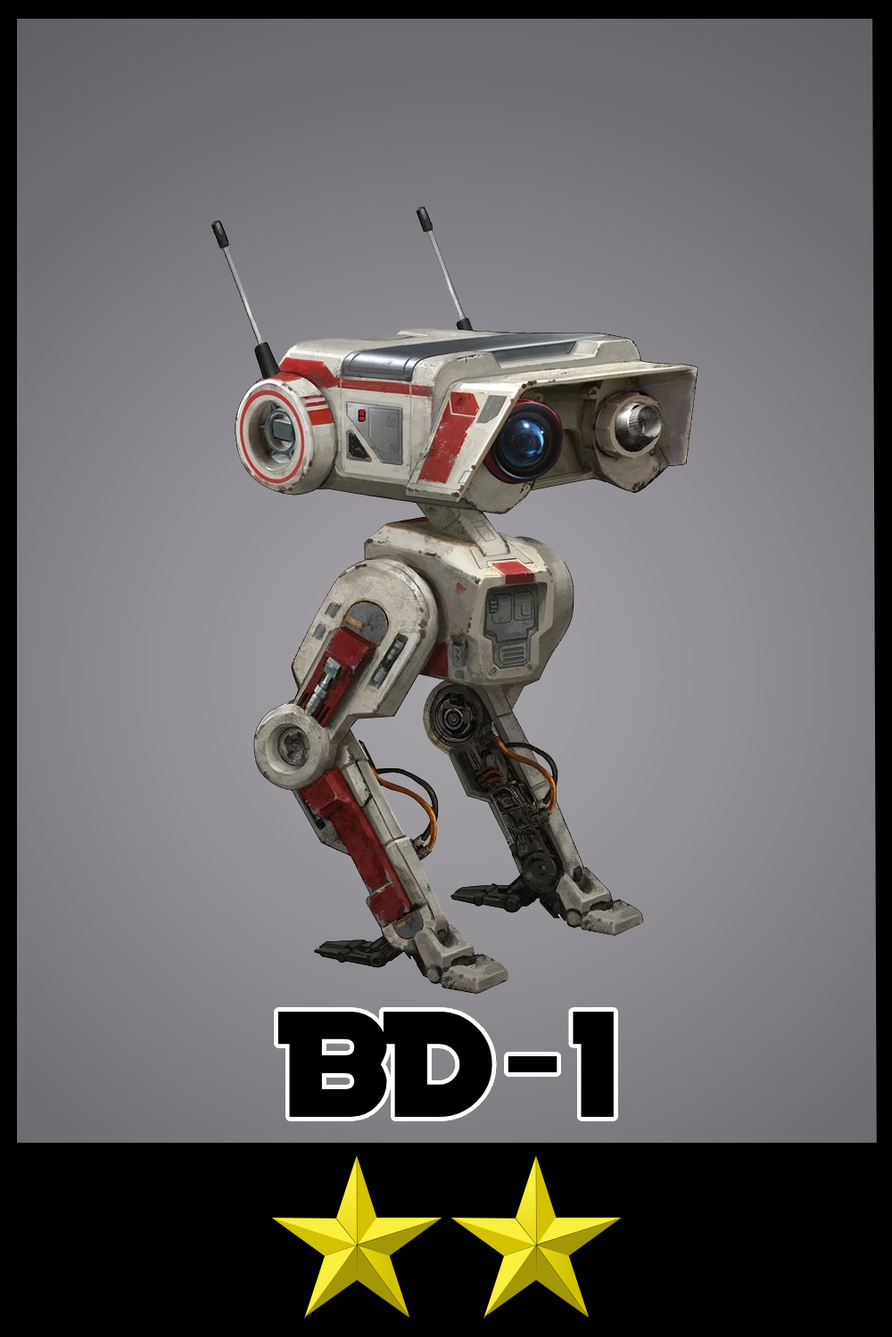
<style>
.page{position:relative;width:892px;height:1337px}
.page>*{position:absolute;margin:0}
.t1{font:162px "DistantGalaxy";color:#000000}
</style>
<div class="page">
<p class="t1" style="left:277px;top:1012px;width:336px;height:105px">BD-1</p>
</div>
